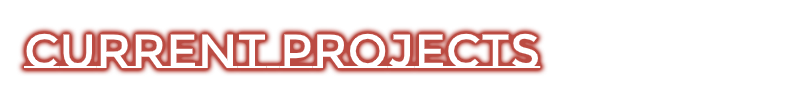
<style>
.page{position:relative;width:800px;height:100px;background:#ffffff}
.page>*{position:absolute;margin:0}
.t1{font:48px "MontserratSubrayada-Regular";color:#ffffff}
</style>
<div class="page">
<p class="t1" style="left:24px;top:33px;width:517px;height:35px">Current projects</p>
</div>
